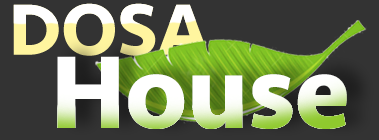
<style>
.page{position:relative;width:379px;height:140px;background:#333333}
.page>*{position:absolute;margin:0}
.t1{font:75.2px "Seravek-Bold"}
.t2{font:106.7px "Seravek-Bold";color:#ffffff}
</style>
<div class="page">
<p class="t1" style="left:13px;top:3px;width:196px;height:53px">DOSA</p>
<p class="t2" style="left:57px;top:56px;width:290px;height:73px">House</p>
</div>
